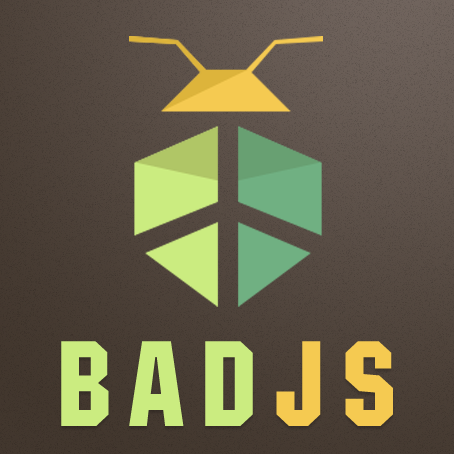
<style>
.page{position:relative;width:454px;height:454px}
.page>*{position:absolute;margin:0}
.t1{font:120px "MachineITCbyBT-Regular";letter-spacing:0.14em;color:#cbec80}
.t2{font:120px "MachineITCbyBT-Regular";letter-spacing:0.14em;color:#f5ca51}
</style>
<div class="page">
<p class="t1" style="left:61px;top:341px;width:332px;height:85px">Bad<span class="t2">Js</span></p>
</div>
